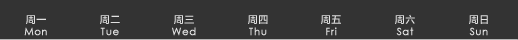
<style>
.page{position:relative;width:518px;height:40px;background:#333333}
.page>*{position:absolute;margin:0}
.t1{font:10px/12.5px "CenturyGothic";letter-spacing:0.04em;color:#e1e1e1;font-weight:bold}
.t2{font:10px/12.5px "FZLTZHK--GBK1-0";letter-spacing:0.04em;color:#e1e1e1}
</style>
<div class="page">
<p class="t1" style="left:24px;top:15px;width:23px;height:21px;text-align:center"><span class="t2">周一<br></span>Mon</p>
<p class="t1" style="left:100px;top:15px;width:20px;height:21px;text-align:center"><span class="t2">周二<br></span>Tue</p>
<p class="t1" style="left:172px;top:15px;width:24px;height:21px;text-align:center"><span class="t2">周三<br></span>Wed</p>
<p class="t1" style="left:248px;top:15px;width:20px;height:21px;text-align:center"><span class="t2">周四<br></span>Thu</p>
<p class="t1" style="left:321px;top:15px;width:20px;height:21px;text-align:center"><span class="t2">周五<br></span>Fri</p>
<p class="t1" style="left:395px;top:14px;width:20px;height:22px;text-align:center"><span class="t2">周六<br></span>Sat</p>
<p class="t1" style="left:469px;top:15px;width:19px;height:21px;text-align:center"><span class="t2">周日<br></span>Sun</p>
</div>
